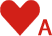
<style>
.page{position:relative;width:52px;height:36px;background:#d22018}
.page>*{position:absolute;margin:0}
.t1{font:23.4px "MyriadPro-Regular";letter-spacing:-0.1em;color:#d22018;font-weight:bold}
</style>
<div class="page">
<p class="t1" style="left:38px;top:19px;width:14px;height:17px">A</p>
</div>
